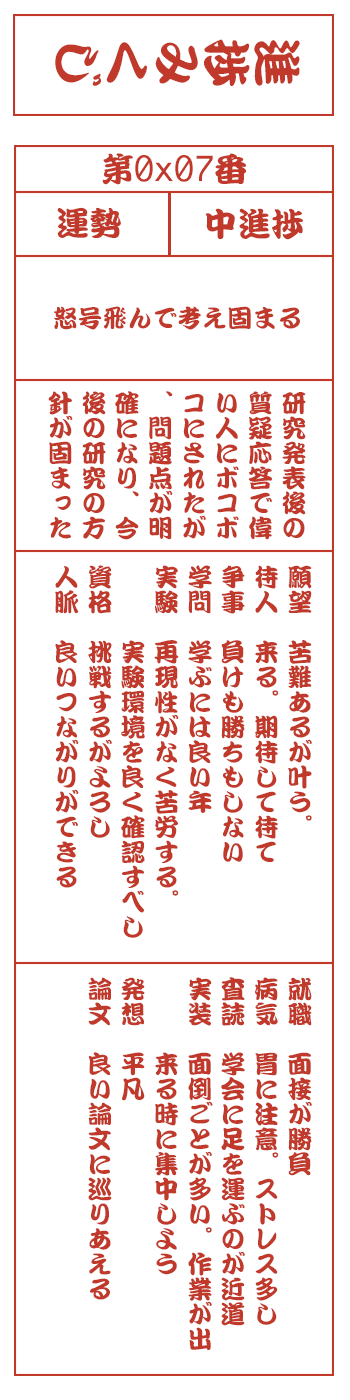
<style>
.page{position:relative;width:350px;height:1400px;background:#ffffff}
.page>*{position:absolute;margin:0}
.t1{font:50px "DFKanTeiRyu-XB-MP-RKSJ-H";color:#c0392b}
.t2{font:33.3px "Monaco";color:#c0392b}
.t3{font:33.3px "DFKanTeiRyu-XB-MP-RKSJ-H";color:#c0392b}
.t4{font:25px "DFKanTeiRyu-XB-MP-RKSJ-H";color:#c0392b}
.t5{font:25px/33.3px "DFKanTeiRyu-XB-MP-RKSJ-H";color:#c0392b}
</style>
<div class="page">
<p class="t1" style="left:55px;top:39px;width:245px;height:47px;rotate:90deg">進捗みくじ</p>
<p class="t2" style="left:102px;top:153px;width:144px;height:32px"><span class="t3">第</span>0x07<span class="t3">番</span></p>
<p class="t3" style="left:57px;top:207px;width:64px;height:31px">運勢</p>
<p class="t3" style="left:205px;top:208px;width:98px;height:32px">中進捗</p>
<p class="t4" style="left:54px;top:306px;width:246px;height:24px">怒号飛んで考え固まる</p>
<p class="t5" style="left:48px;top:391px;width:258px;height:149px">研究発表後の<br>質疑応答で偉<br>い人にボコボ<br>コにされたが<br>、問題点が明<br>確になり、今<br>後の研究の方<br>針が固まった</p>
<p class="t5" style="left:55px;top:565px;width:257px;height:373px">願望　苦難あるが叶う。<br>待人　来る。期待して待て<br>争事　負けも勝ちもしない<br>学問　学ぶには良い年<br>実験　再現性がなく苦労する。<br>　　　実験環境を良く確認すべし<br>資格　挑戦するがよろし<br>人脈　良いつながりができる</p>
<p class="t5" style="left:88px;top:977px;width:224px;height:373px">就職　面接が勝負<br>病気　胃に注意。ストレス多し<br>査読　学会に足を運ぶのが近道<br>実装　面倒ごとが多い。作業が出<br>　　　来る時に集中しよう<br>発想　平凡<br>論文　良い論文に巡りあえる</p>
</div>
